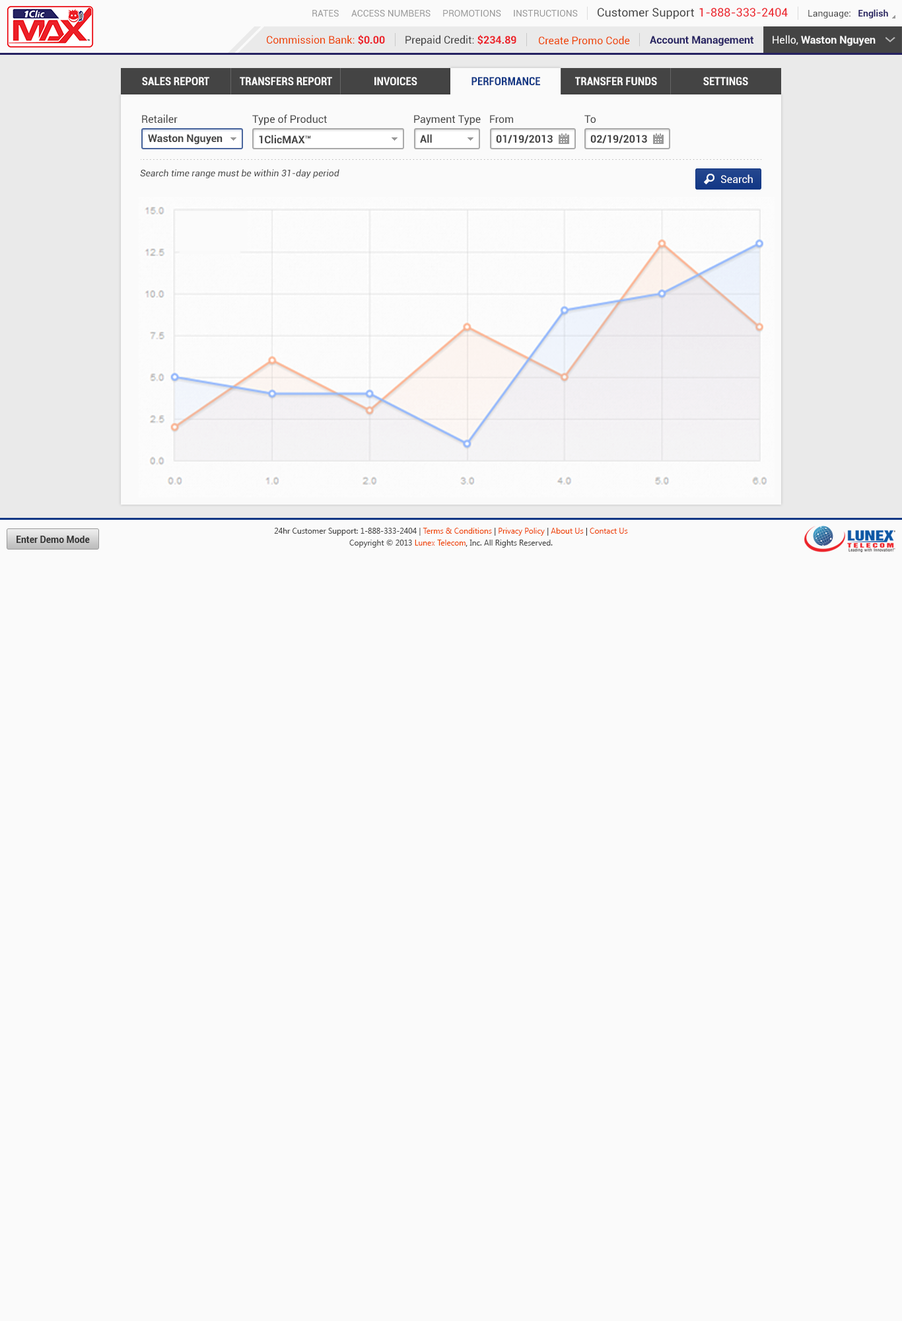
<style>
.page{position:relative;width:902px;height:1321px;background:#fafafa}
.page>*{position:absolute;margin:0}
.t1{font:9.2px "Roboto-Regular";color:#999999}
.t2{font:11.6px "Roboto-Regular";color:#444444}
.t3{font:11.6px "Roboto-Regular";color:#ec2029}
.t4{font:9.2px "Roboto-Regular";color:#444444}
.t5{font:9.2px "Roboto-Bold";color:#262262}
.t6{font:10.6px "Roboto-Regular";color:#ee4400}
.t7{font:10.6px "Roboto-Bold";color:#ec2028}
.t8{font:10.6px "Roboto-Regular";color:#444444}
.t9{font:10.6px "Roboto-Bold";color:#262262}
.t10{font:10.6px "Roboto-Bold";color:#fafafa}
.t11{font:10.6px "Roboto-Regular";color:#fafafa}
.t12{font:11.2px "Roboto-BoldCondensed";color:#fafafa}
.t13{font:11.2px "Roboto-BoldCondensed";color:#123785}
.t14{font:10.6px "Roboto-Bold";color:#444444}
.t15{font:9.2px "Roboto-Italic";color:#444444}
.t16{font:10.6px "Roboto-Regular";color:#ffffff}
.t17{font:7.9px/11.9px "SegoeUI";color:#444444}
.t18{font:7.9px/11.9px "SegoeUI";color:#ee4400}
.t19{font:7.9px/11.9px "SegoeUI";color:#333333}
.t20{font:9.2px "Roboto-Bold";color:#333333}
</style>
<div class="page">
<p class="t1" style="left:312px;top:10px;width:27px;height:7px">RATES</p>
<p class="t1" style="left:351px;top:10px;width:80px;height:7px">ACCESS NUMBERS</p>
<p class="t1" style="left:443px;top:10px;width:58px;height:7px">PROMOTIONS</p>
<p class="t1" style="left:514px;top:10px;width:64px;height:7px">INSTRUCTIONS</p>
<p class="t2" style="left:598px;top:8px;width:96px;height:11px">Customer Support</p>
<p class="t3" style="left:700px;top:8px;width:88px;height:9px">1-888-333-2404</p>
<p class="t4" style="left:809px;top:9px;width:80px;height:9px">Language:   <span class="t5">English</span></p>
<p class="t6" style="left:267px;top:35px;width:118px;height:10px">Commission Bank: <span class="t7">$0.00</span></p>
<p class="t8" style="left:406px;top:35px;width:111px;height:11px">Prepaid Credit: <span class="t7">$234.89</span></p>
<p class="t6" style="left:539px;top:36px;width:91px;height:9px">Create Promo Code</p>
<p class="t9" style="left:650px;top:36px;width:104px;height:10px">Account Management</p>
<p class="t10" style="left:773px;top:35px;width:103px;height:11px"><span class="t11">Hello, </span>Waston Nguyen</p>
<p class="t12" style="left:142px;top:77px;width:67px;height:8px">SALES REPORT</p>
<p class="t12" style="left:240px;top:77px;width:92px;height:8px">TRANSFERS REPORT</p>
<p class="t12" style="left:375px;top:77px;width:43px;height:8px">INVOICES</p>
<p class="t13" style="left:472px;top:77px;width:68px;height:8px">PERFORMANCE</p>
<p class="t12" style="left:575px;top:77px;width:82px;height:8px">TRANSFER FUNDS</p>
<p class="t12" style="left:704px;top:77px;width:45px;height:8px">SETTINGS</p>
<p class="t8" style="left:142px;top:114px;width:36px;height:10px">Retailer</p>
<p class="t8" style="left:252px;top:114px;width:75px;height:12px">Type of Product</p>
<p class="t8" style="left:414px;top:115px;width:67px;height:11px">Payment Type</p>
<p class="t8" style="left:490px;top:115px;width:23px;height:8px">From</p>
<p class="t8" style="left:585px;top:115px;width:11px;height:8px">To</p>
<p class="t14" style="left:148px;top:134px;width:75px;height:11px">Waston Nguyen</p>
<p class="t14" style="left:259px;top:135px;width:52px;height:8px">1ClicMAX™</p>
<p class="t14" style="left:420px;top:134px;width:12px;height:9px">All</p>
<p class="t14" style="left:496px;top:135px;width:57px;height:8px">01/19/2013</p>
<p class="t14" style="left:591px;top:135px;width:56px;height:8px">02/19/2013</p>
<p class="t15" style="left:140px;top:169px;width:200px;height:9px">Search time range must be within 31-day period</p>
<p class="t16" style="left:721px;top:174px;width:32px;height:10px">Search</p>
<p class="t17" style="left:274px;top:528px;width:354px;height:20px;text-align:center">24hr Customer Support: 1-888-333-2404 | <span class="t18">Terms &amp; Conditions</span><span class="t19"> | </span><span class="t18">Privacy Policy</span><span class="t19"> | </span><span class="t18">About Us</span><span class="t19"> | </span><span class="t18">Contact Us<br></span>Copyright © 2013 <span class="t18">Lunex Telecom</span><span class="t19">,</span> Inc. All Rights Reserved.</p>
<p class="t20" style="left:17px;top:536px;width:73px;height:7px">Enter Demo Mode</p>
</div>
